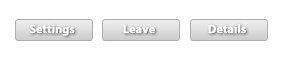
<style>
.page{position:relative;width:300px;height:73px;background:#ffffff}
.page>*{position:absolute;margin:0}
.t1{font:12px "MyriadPro-Bold";letter-spacing:-0.015em;color:#ffffff;font-weight:bold}
</style>
<div class="page">
<p class="t1" style="left:30px;top:24px;width:45px;height:12px">Settings</p>
<p class="t1" style="left:123px;top:24px;width:32px;height:10px">Leave</p>
<p class="t1" style="left:208px;top:24px;width:38px;height:10px">Details</p>
</div>
